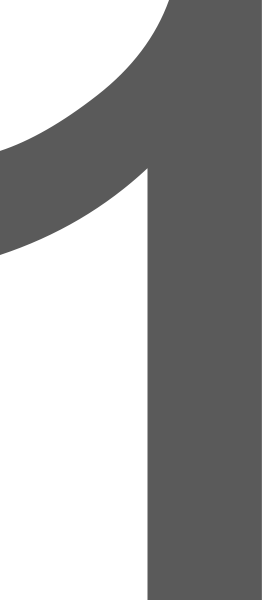
<style>
.page{position:relative;width:262px;height:600px;background:#5a5a5a}
.page>*{position:absolute;margin:0}
.t1{font:833.3px "Arial-BoldMT";letter-spacing:0.04em;color:#5a5a5a}
</style>
<div class="page">
<p class="t1" style="left:0px;top:0px;width:262px;height:600px">1</p>
</div>
